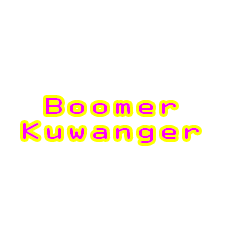
<style>
.page{position:relative;width:225px;height:225px;background:#ffffff}
.page>*{position:absolute;margin:0}
.t1{font:20.7px "OCRAStd";color:#ff00f6;scale:1.55 1}
</style>
<div class="page">
<p class="t1" style="left:23px;top:98px;width:176px;height:45px;text-align:center">Boomer<br>Kuwanger</p>
</div>
